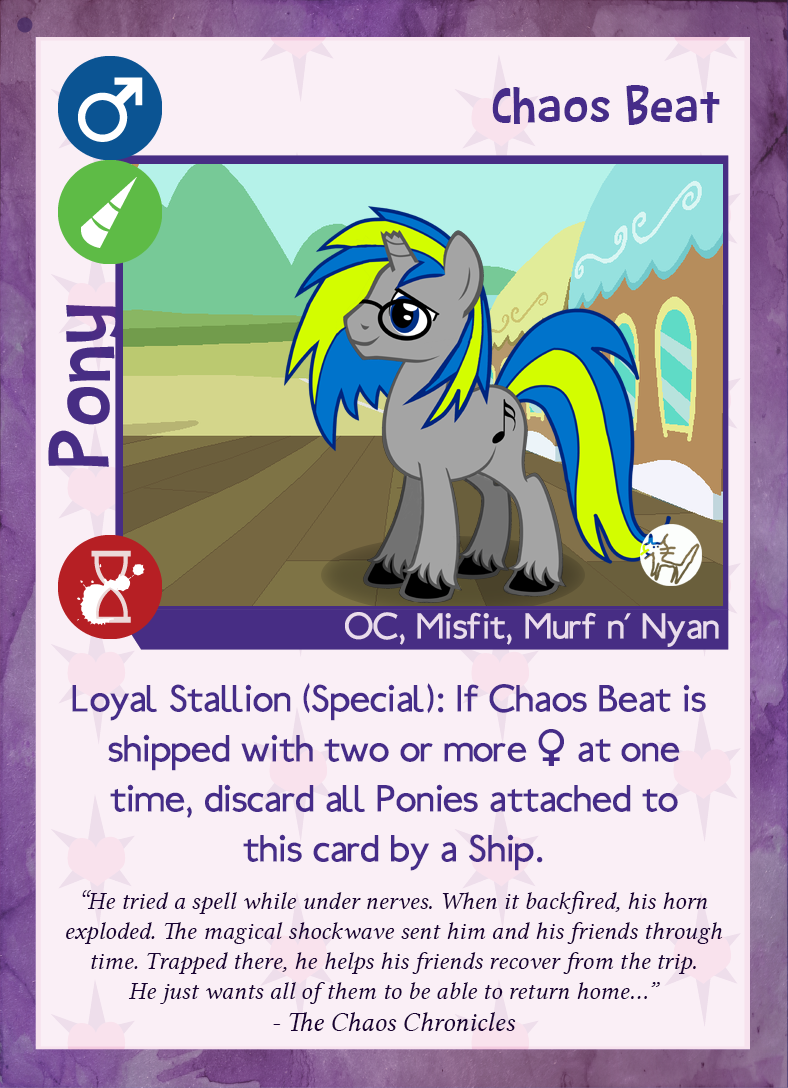
<style>
.page{position:relative;width:788px;height:1088px;background:#faeff6}
.page>*{position:absolute;margin:0}
.t1{font:56.5px "BarthowheelRegular";color:#462c89}
.t2{font:39.8px "Ubahn";color:#eadcec}
.t3{font:41.7px "Ubahn";color:#462c89}
.t4{font:25px "LinLibertineI";color:#190233}
.t5{font:27.1px "LinLibertineI";color:#190233}
</style>
<div class="page">
<p class="t1" style="left:492px;top:85px;width:228px;height:40px">Chaos Beat</p>
<p class="t2" style="left:345px;top:612px;width:374px;height:35px">OC, Misfit, Murf n’ Nyan</p>
<p class="t3" style="left:72px;top:682px;width:634px;height:189px;text-align:center">Loyal Stallion (Special): If Chaos Beat is <br>shipped with two or more * at one<br>time, discard all Ponies attached to<br>this card by a Ship.</p>
<p class="t4" style="left:66px;top:890px;width:657px;height:141px;text-align:center">“He tried a spell while under nerves. When it backfired, his horn<br>exploded. The magical shockwave sent him and his friends through<br>time. Trapped there, he helps his friends recover from the trip.<br>He just wants all of them to be able to return home...”<br>- <span class="t5">The Chaos Chronicles</span></p>
</div>
